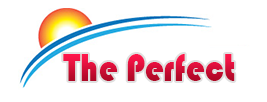
<style>
.page{position:relative;width:267px;height:102px;background:#ffffff}
.page>*{position:absolute;margin:0}
.t1{font:39.7px "Bauhaus93";scale:0.85 1}
</style>
<div class="page">
<p class="t1" style="left:63px;top:53px;width:172px;height:28px">The Perfect</p>
</div>
